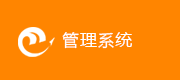
<style>
.page{position:relative;width:180px;height:80px;background:#ff8500}
.page>*{position:absolute;margin:0}
.t1{font:16.5px "MicrosoftYaHei";letter-spacing:0.04em;color:#ffffff}
</style>
<div class="page">
<p class="t1" style="left:62px;top:32px;width:70px;height:17px">管理系统</p>
</div>
